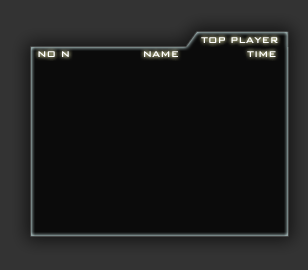
<style>
.page{position:relative;width:308px;height:270px;background:#0b0b0b}
.page>*{position:absolute;margin:0}
.t1{font:11px "BankGothic-Medium";color:#ffffff}
</style>
<div class="page">
<p class="t1" style="left:201px;top:37px;width:77px;height:6px">TOP PLAYER</p>
<p class="t1" style="left:38px;top:51px;width:238px;height:6px">NO N                 NAME                TIME</p>
</div>
